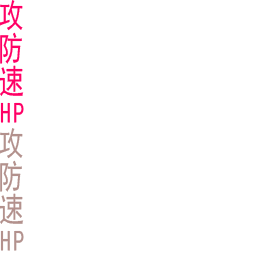
<style>
.page{position:relative;width:256px;height:256px;background:#ffffff}
.page>*{position:absolute;margin:0}
.t1{font:33.3px "SimHei";letter-spacing:0.1em;color:#ff0066}
.t2{font:29.2px "SimHei";letter-spacing:0.1em;color:#ff0066}
.t3{font:33.3px "SimHei";letter-spacing:0.1em;color:#b3928e}
.t4{font:29.2px "SimHei";letter-spacing:0.1em;color:#b3928e}
</style>
<div class="page">
<p class="t1" style="left:0px;top:0px;width:23px;height:31px">攻</p>
<p class="t1" style="left:0px;top:32px;width:22px;height:32px">防</p>
<p class="t1" style="left:0px;top:65px;width:24px;height:31px">速</p>
<p class="t2" style="left:0px;top:102px;width:24px;height:21px">HP</p>
<p class="t3" style="left:0px;top:128px;width:23px;height:31px">攻</p>
<p class="t3" style="left:0px;top:160px;width:22px;height:32px">防</p>
<p class="t3" style="left:0px;top:193px;width:24px;height:31px">速</p>
<p class="t4" style="left:0px;top:230px;width:24px;height:21px">HP</p>
</div>
